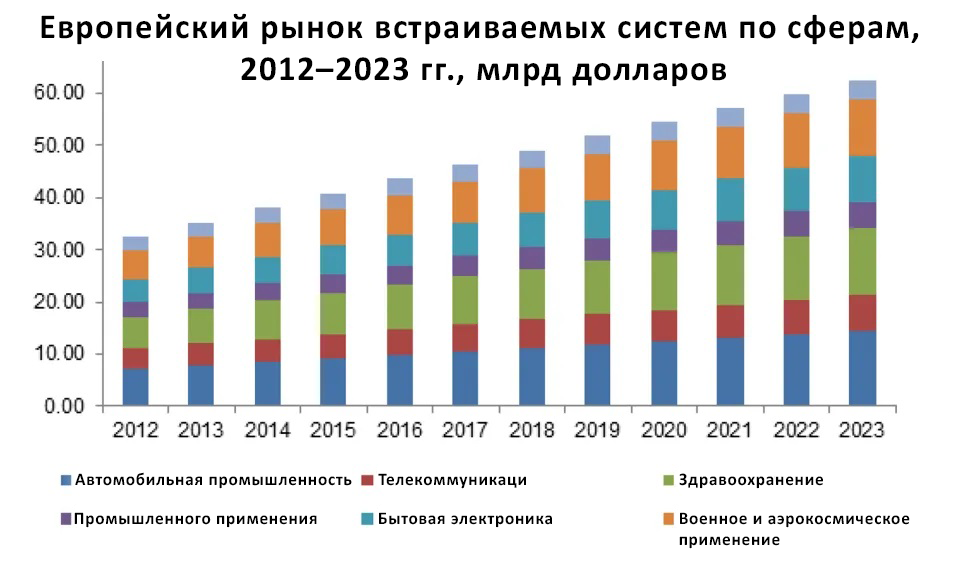
<style>
.page{position:relative;width:958px;height:563px;background:#ffffff}
.page>*{position:absolute;margin:0}
.t1{font:35.4px "Calibri-Bold";letter-spacing:0.04em;color:#000000}
.t2{font:17.7px "Calibri-Bold";letter-spacing:0.04em;color:#000000}
</style>
<div class="page">
<p class="t1" style="left:41px;top:13px;width:878px;height:74px;text-align:center">Европейский рынок встраиваемых систем по сферам, <br>2012–2023 гг., млрд долларов</p>
<p class="t2" style="left:75px;top:472px;width:277px;height:17px">Автомобильная промышленность</p>
<p class="t2" style="left:378px;top:473px;width:148px;height:16px">Телекоммуникаци</p>
<p class="t2" style="left:679px;top:473px;width:144px;height:16px">Здравоохранение</p>
<p class="t2" style="left:74px;top:512px;width:243px;height:16px">Промышленного применения</p>
<p class="t2" style="left:379px;top:512px;width:173px;height:16px">Бытовая электроника</p>
<p class="t2" style="left:679px;top:512px;width:231px;height:37px">Военное и аэрокосмическое <br>применение</p>
</div>
